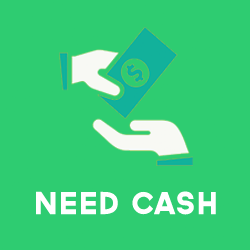
<style>
.page{position:relative;width:250px;height:250px;background:#2ecc71}
.page>*{position:absolute;margin:0}
.t1{font:30px "Governor";color:#ffffff}
</style>
<div class="page">
<p class="t1" style="left:36px;top:191px;width:180px;height:24px">need cash</p>
</div>
